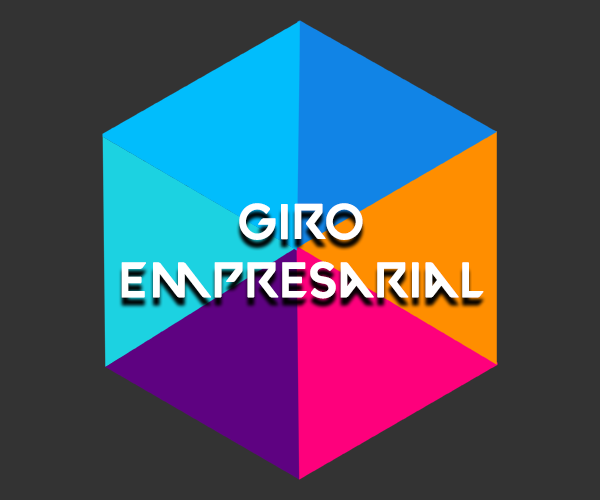
<style>
.page{position:relative;width:600px;height:500px;background:#333333}
.page>*{position:absolute;margin:0}
.t1{font:50px/58.3px "VALORANT-Regular";color:#ffffff}
</style>
<div class="page">
<p class="t1" style="left:121px;top:203px;width:363px;height:96px;text-align:center">Giro <br>Empresarial</p>
</div>
